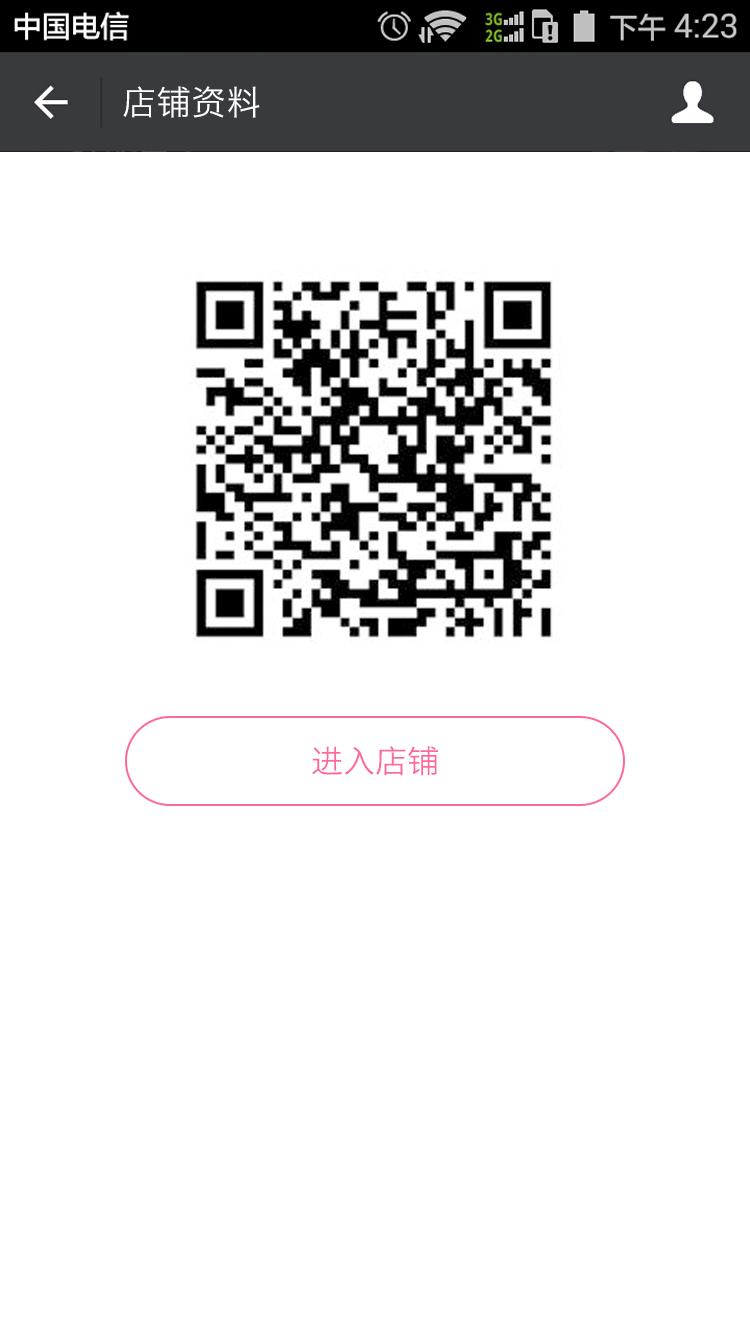
<style>
.page{position:relative;width:750px;height:1334px;background:#ffffff}
.page>*{position:absolute;margin:0}
.t1{font:34px "HiraginoSansGB-W3";letter-spacing:0.022em;color:#ffffff}
.t2{font:32px "HiraginoSansGB-W3";color:#ff6699}
</style>
<div class="page">
<p class="t1" style="left:123px;top:86px;width:137px;height:32px">店铺资料</p>
<p class="t2" style="left:312px;top:746px;width:126px;height:30px">进入店铺</p>
</div>
